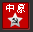
<style>
.page{position:relative;width:33px;height:32px;background:#c50000}
.page>*{position:absolute;margin:0}
.t1{font:10.4px "SimSun";color:#ffffff}
</style>
<div class="page">
<p class="t1" style="left:6px;top:4px;width:19px;height:9px">中原</p>
</div>
